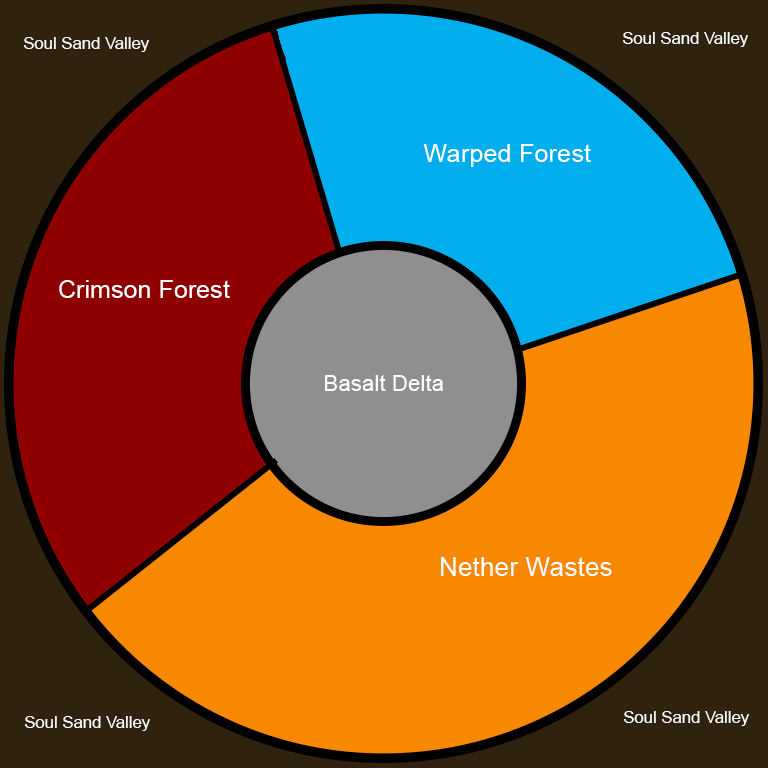
<style>
.page{position:relative;width:768px;height:768px;background:#f78800}
.page>*{position:absolute;margin:0}
.t1{font:16.7px "ArialMT";color:#ffffff}
.t2{font:25.5px "ArialMT";color:#ffffff}
.t3{font:25.1px "ArialMT";color:#ffffff}
.t4{font:22.4px "ArialMT";color:#ffffff}
.t5{font:26.5px "ArialMT";color:#ffffff}
</style>
<div class="page">
<p class="t1" style="left:24px;top:37px;width:125px;height:15px">Soul Sand Valley</p>
<p class="t1" style="left:623px;top:32px;width:125px;height:15px">Soul Sand Valley</p>
<p class="t2" style="left:423px;top:144px;width:168px;height:23px">Warped Forest</p>
<p class="t3" style="left:59px;top:280px;width:171px;height:18px">Crimson Forest</p>
<p class="t4" style="left:325px;top:375px;width:118px;height:16px">Basalt Delta</p>
<p class="t5" style="left:441px;top:557px;width:171px;height:19px">Nether Wastes</p>
<p class="t1" style="left:624px;top:711px;width:125px;height:15px">Soul Sand Valley</p>
<p class="t1" style="left:25px;top:716px;width:125px;height:15px">Soul Sand Valley</p>
</div>
